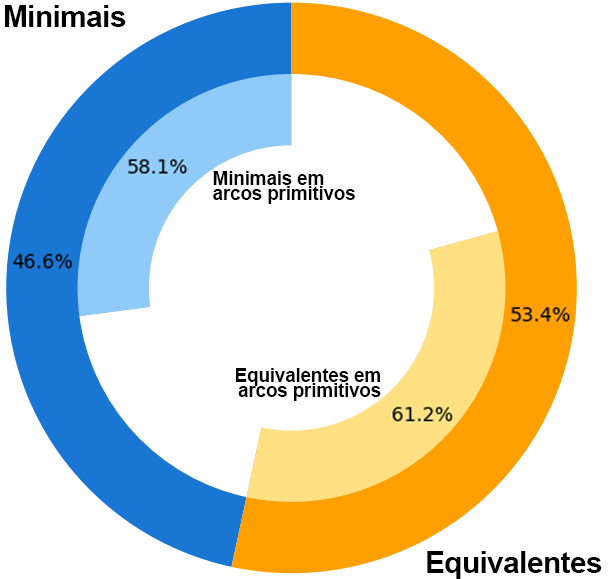
<style>
.page{position:relative;width:609px;height:579px;background:#ffffff}
.page>*{position:absolute;margin:0}
.t1{font:29.8px "Arial-BoldMT";letter-spacing:-0.02em;color:#000000}
.t2{font:19.3px/15.7px "Arial-BoldMT";letter-spacing:-0.02em;color:#000000}
</style>
<div class="page">
<p class="t1" style="left:5px;top:5px;width:121px;height:22px">Minimais</p>
<p class="t2" style="left:213px;top:171px;width:142px;height:33px">Minimais em<br>arcos primitivos</p>
<p class="t2" style="left:236px;top:368px;width:145px;height:33px;text-align:right">Equivalentes em<br>arcos primitivos</p>
<p class="t1" style="left:427px;top:551px;width:175px;height:28px">Equivalentes</p>
</div>
